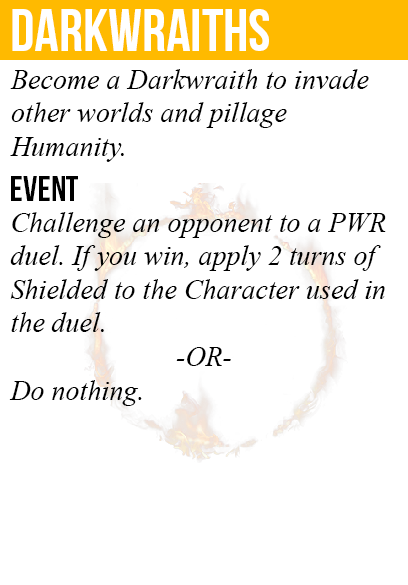
<style>
.page{position:relative;width:408px;height:585px;background:#ffffff}
.page>*{position:absolute;margin:0}
.t1{font:60px "BebasNeue";color:#ffffff}
.t2{font:28px "TimesNewRomanPS-ItalicMT";color:#000000}
.t3{font:36px "BebasNeue";color:#000000}
</style>
<div class="page">
<p class="t1" style="left:12px;top:9px;width:257px;height:42px">darkwraiths</p>
<p class="t2" style="left:10px;top:69px;width:359px;height:93px">Become a Darkwraith to invade<br>other worlds and pillage<br>Humanity.</p>
<p class="t3" style="left:11px;top:176px;width:67px;height:25px">event</p>
<p class="t2" style="left:9px;top:212px;width:377px;height:194px">Challenge an opponent to a PWR<br>duel. If you win, apply 2 turns of<br>Shielded to the Character used in<br>the duel.<br><br>Do nothing.</p>
<p class="t2" style="left:176px;top:347px;width:55px;height:19px">-OR-</p>
</div>
